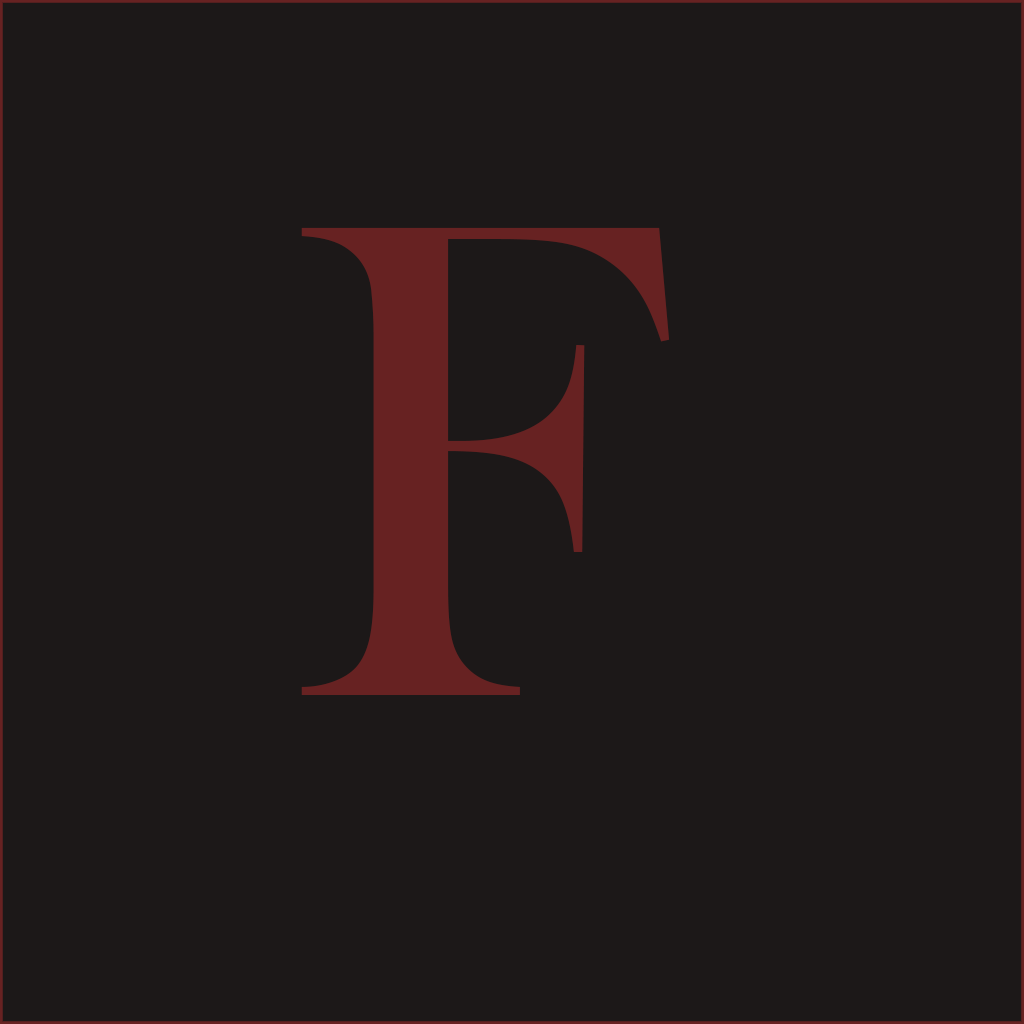
<style>
.page{position:relative;width:1024px;height:1024px;background:#1c1818}
.page>*{position:absolute;margin:0}
.t1{font:700px "BaskOldFace";color:#672222}
</style>
<div class="page">
<p class="t1" style="left:301px;top:227px;width:369px;height:468px">F</p>
</div>
